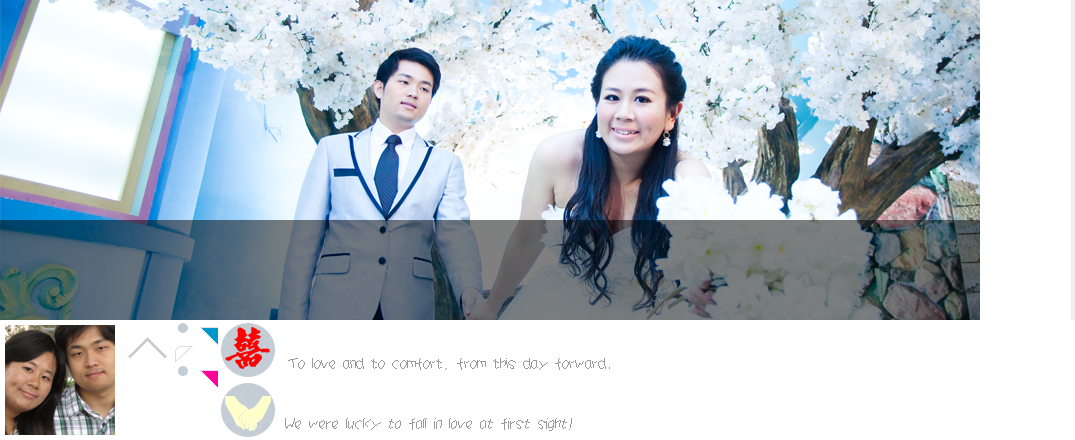
<style>
.page{position:relative;width:1075px;height:440px;background:#ffffff}
.page>*{position:absolute;margin:0}
.t1{font:16px "JYaYa";color:#999999;scale:0.9 1}
.t2{font:16px "JYaYa";color:#999999;font-style:italic;scale:0.9 1}
</style>
<div class="page">
<p class="t1" style="left:288px;top:358px;width:322px;height:12px">To love and to comfort, from this day forward.</p>
<p class="t2" style="left:285px;top:418px;width:287px;height:13px">We were lucky to fall in love at first sight!</p>
</div>
